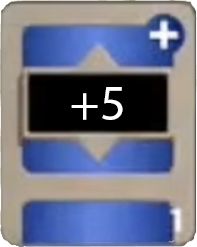
<style>
.page{position:relative;width:197px;height:247px}
.page>*{position:absolute;margin:0}
.t1{font:50px "MyriadPro-Regular";color:#ffffff}
</style>
<div class="page">
<p class="t1" style="left:71px;top:87px;width:52px;height:33px">+5</p>
</div>
